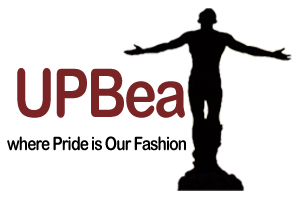
<style>
.page{position:relative;width:300px;height:200px;background:#ffffff}
.page>*{position:absolute;margin:0}
.t1{font:67.2px "ArialRoundedMTBold";letter-spacing:-0.055em;color:#7a2426;scale:0.83 1}
.t2{font:18.5px "ArialRoundedMTBold";letter-spacing:-0.055em;color:#000000;scale:0.83 1}
</style>
<div class="page">
<p class="t1" style="left:17px;top:68px;width:168px;height:50px">UPBea</p>
<p class="t2" style="left:7px;top:136px;width:179px;height:15px">where Pride is Our Fashion</p>
</div>
